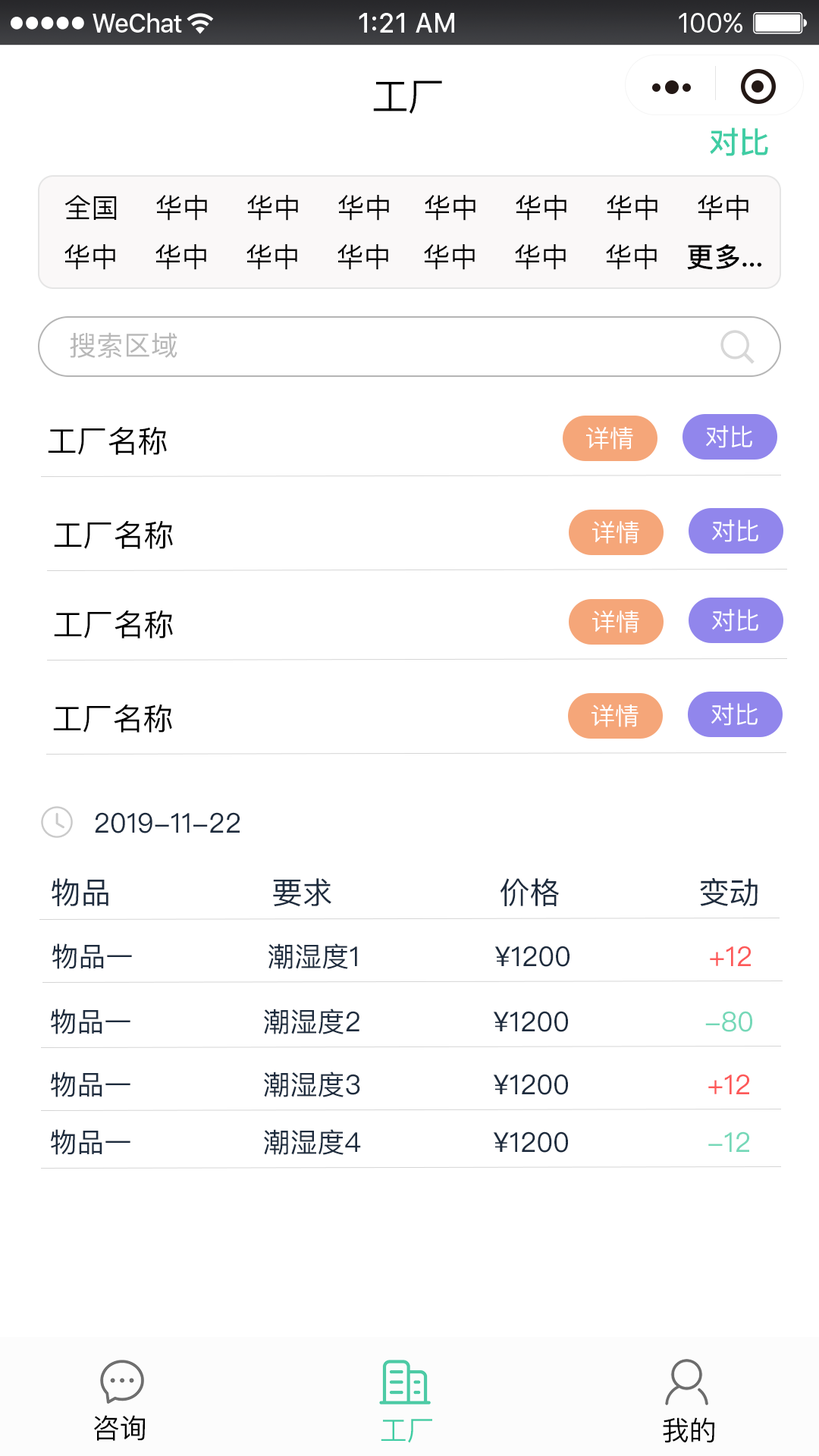
<style>
.page{position:relative;width:819px;height:1456px;background:#ffffff}
.page>*{position:absolute;margin:0}
.t1{font:37.9px "PingFangSC-Regular";color:#000000}
.t2{font:30.3px "PingFangSC-Medium";color:#40cda4}
.t3{font:27.3px "PingFangSC-Regular";color:#000000}
.t4{font:27.3px "PingFangSC-Medium";color:#000000}
.t5{font:27.3px "PingFangSC-Regular";color:#b8b8b8}
.t6{font:24.3px "PingFangSC-Regular";color:#ffffff}
.t7{font:30.3px "PingFangSC-Regular";color:#000000}
.t8{font:27.3px "PingFangSC-Regular";color:#1e2c3e}
.t9{font:30.3px "PingFangSC-Regular";color:#1e2c3e}
.t10{font:27.3px "PingFangSC-Regular";color:#fd5959}
.t11{font:27.3px "PingFangSC-Regular";color:#75d8b8}
.t12{font:27.3px "PingFangSC-Regular";color:#40cda4}
</style>
<div class="page">
<p class="t1" style="left:373px;top:80px;width:69px;height:34px">工厂</p>
<p class="t2" style="left:710px;top:127px;width:58px;height:29px">对比</p>
<p class="t3" style="left:64px;top:195px;width:53px;height:25px">全国</p>
<p class="t3" style="left:156px;top:195px;width:51px;height:26px">华中</p>
<p class="t3" style="left:247px;top:195px;width:51px;height:26px">华中</p>
<p class="t3" style="left:338px;top:195px;width:51px;height:26px">华中</p>
<p class="t3" style="left:425px;top:195px;width:50px;height:26px">华中</p>
<p class="t3" style="left:516px;top:195px;width:50px;height:26px">华中</p>
<p class="t3" style="left:607px;top:195px;width:50px;height:26px">华中</p>
<p class="t3" style="left:698px;top:195px;width:50px;height:26px">华中</p>
<p class="t3" style="left:64px;top:244px;width:51px;height:26px">华中</p>
<p class="t3" style="left:155px;top:244px;width:51px;height:26px">华中</p>
<p class="t3" style="left:246px;top:244px;width:51px;height:26px">华中</p>
<p class="t3" style="left:337px;top:244px;width:51px;height:26px">华中</p>
<p class="t3" style="left:424px;top:244px;width:51px;height:26px">华中</p>
<p class="t3" style="left:515px;top:244px;width:51px;height:26px">华中</p>
<p class="t3" style="left:606px;top:244px;width:51px;height:26px">华中</p>
<p class="t4" style="left:687px;top:243px;width:74px;height:27px">更多...</p>
<p class="t5" style="left:70px;top:332px;width:107px;height:26px">搜索区域</p>
<p class="t6" style="left:706px;top:425px;width:46px;height:23px">对比</p>
<p class="t7" style="left:48px;top:427px;width:119px;height:28px">工厂名称</p>
<p class="t6" style="left:586px;top:427px;width:47px;height:23px">详情</p>
<p class="t7" style="left:54px;top:521px;width:119px;height:28px">工厂名称</p>
<p class="t6" style="left:592px;top:521px;width:47px;height:23px">详情</p>
<p class="t6" style="left:712px;top:519px;width:46px;height:23px">对比</p>
<p class="t7" style="left:54px;top:610px;width:119px;height:29px">工厂名称</p>
<p class="t6" style="left:592px;top:610px;width:47px;height:23px">详情</p>
<p class="t6" style="left:712px;top:609px;width:46px;height:23px">对比</p>
<p class="t7" style="left:53px;top:704px;width:119px;height:29px">工厂名称</p>
<p class="t6" style="left:591px;top:704px;width:48px;height:23px">详情</p>
<p class="t6" style="left:711px;top:703px;width:47px;height:23px">对比</p>
<p class="t8" style="left:95px;top:812px;width:145px;height:21px">2019-11-22</p>
<p class="t9" style="left:52px;top:878px;width:56px;height:28px">物品</p>
<p class="t9" style="left:273px;top:878px;width:58px;height:29px">要求</p>
<p class="t9" style="left:500px;top:878px;width:59px;height:28px">价格</p>
<p class="t9" style="left:700px;top:877px;width:58px;height:29px">变动</p>
<p class="t8" style="left:52px;top:943px;width:80px;height:26px">物品一</p>
<p class="t8" style="left:268px;top:943px;width:89px;height:26px">潮湿度1</p>
<p class="t8" style="left:494px;top:946px;width:76px;height:21px">¥1200</p>
<p class="t10" style="left:710px;top:946px;width:41px;height:20px">+12</p>
<p class="t8" style="left:50px;top:1009px;width:80px;height:25px">物品一</p>
<p class="t8" style="left:264px;top:1009px;width:95px;height:25px">潮湿度2</p>
<p class="t8" style="left:493px;top:1011px;width:75px;height:21px">¥1200</p>
<p class="t11" style="left:705px;top:1011px;width:47px;height:21px">-80</p>
<p class="t8" style="left:50px;top:1072px;width:80px;height:25px">物品一</p>
<p class="t8" style="left:264px;top:1072px;width:96px;height:25px">潮湿度3</p>
<p class="t8" style="left:493px;top:1074px;width:75px;height:21px">¥1200</p>
<p class="t10" style="left:708px;top:1074px;width:41px;height:20px">+12</p>
<p class="t8" style="left:50px;top:1129px;width:80px;height:26px">物品一</p>
<p class="t8" style="left:264px;top:1129px;width:97px;height:26px">潮湿度4</p>
<p class="t8" style="left:493px;top:1131px;width:75px;height:22px">¥1200</p>
<p class="t11" style="left:708px;top:1131px;width:41px;height:21px">-12</p>
<p class="t3" style="left:94px;top:1415px;width:51px;height:26px">咨询</p>
<p class="t12" style="left:381px;top:1419px;width:51px;height:24px">工厂</p>
<p class="t3" style="left:663px;top:1417px;width:51px;height:26px">我的</p>
</div>
